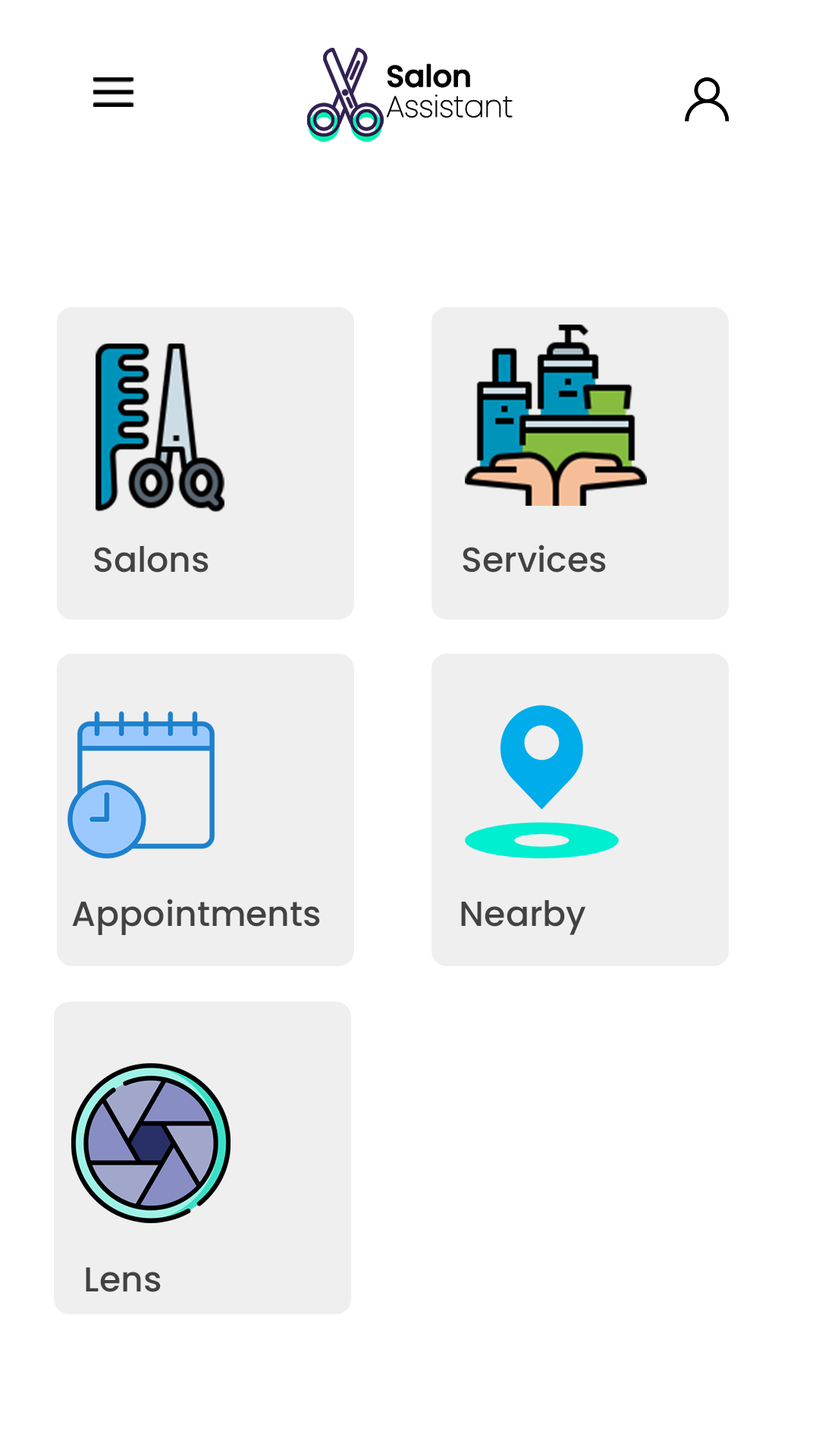
<style>
.page{position:relative;width:819px;height:1456px;background:#ffffff}
.page>*{position:absolute;margin:0}
.t1{font:34.8px "Poppins-Medium";color:#424242}
</style>
<div class="page">
<p class="t1" style="left:94px;top:546px;width:115px;height:27px">Salons</p>
<p class="t1" style="left:463px;top:544px;width:143px;height:29px">Services</p>
<p class="t1" style="left:72px;top:899px;width:248px;height:36px">Appointments</p>
<p class="t1" style="left:461px;top:900px;width:125px;height:35px">Nearby</p>
<p class="t1" style="left:86px;top:1267px;width:75px;height:25px">Lens</p>
</div>
